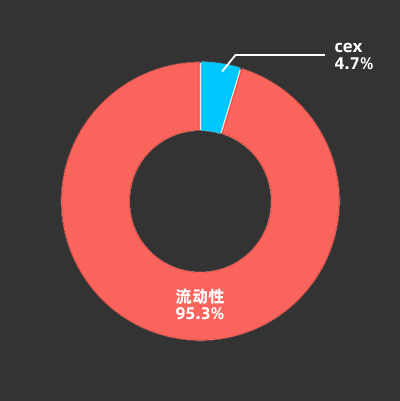
<style>
.page{position:relative;width:400px;height:401px;background:#333333}
.page>*{position:absolute;margin:0}
.t1{font:16.7px/17px "AlibabaPuHuiTi-Bold";color:#ffffff}
</style>
<div class="page">
<p class="t1" style="left:335px;top:42px;width:38px;height:28px">cex<br>4.7%</p>
<p class="t1" style="left:176px;top:288px;width:48px;height:32px">流动性<br>95.3%</p>
</div>
